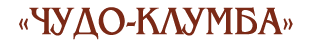
<style>
.page{position:relative;width:325px;height:43px;background:#ffffff}
.page>*{position:absolute;margin:0}
.t1{font:39.6px "BangkokPlain";letter-spacing:-0.025em;color:#7b2916;font-weight:bold;scale:0.91 1}
</style>
<div class="page">
<p class="t1" style="left:19px;top:7px;width:274px;height:33px">«ЧУДО-КЛУМБА»</p>
</div>
